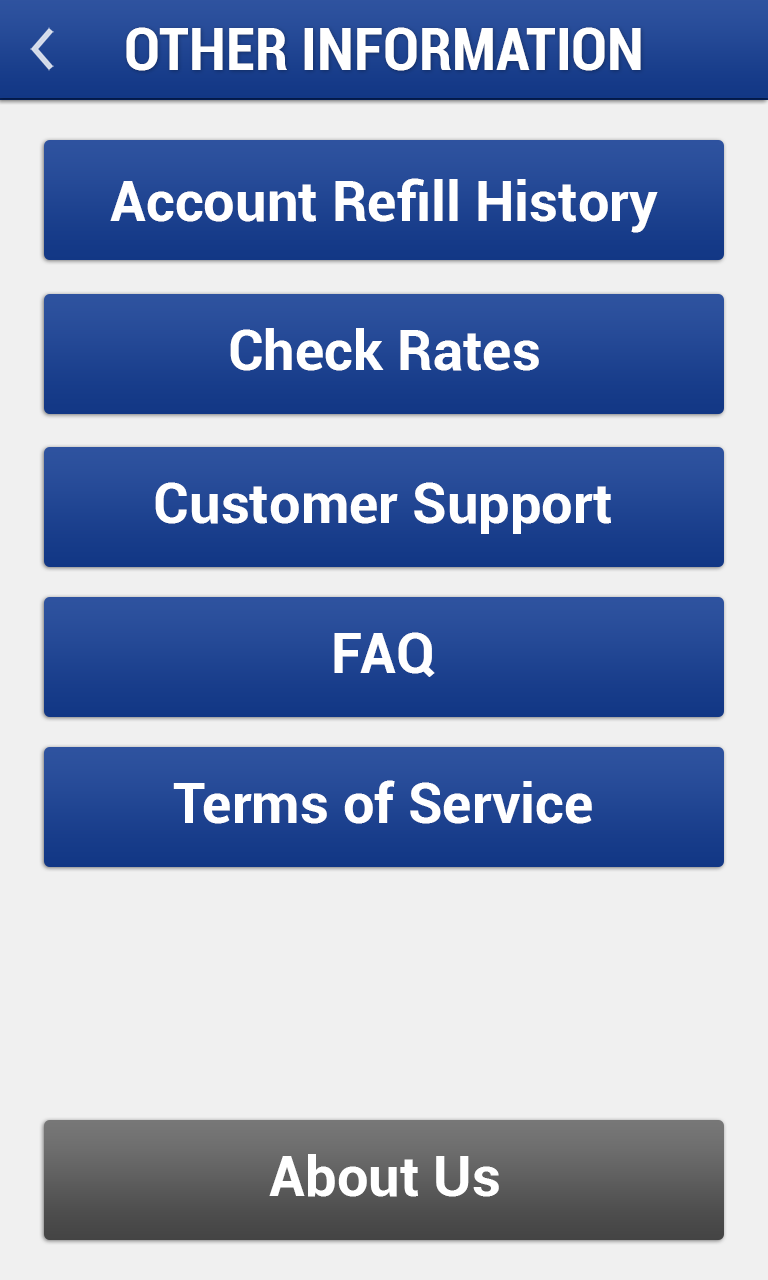
<style>
.page{position:relative;width:768px;height:1280px;background:#f0f0f0}
.page>*{position:absolute;margin:0}
.t1{font:60px "Roboto-BoldCondensed";color:#ffffff}
.t2{font:56px "Roboto-Bold";color:#ffffff}
</style>
<div class="page">
<p class="t1" style="left:126px;top:27px;width:515px;height:44px">OTHER INFORMATION</p>
<p class="t2" style="left:110px;top:178px;width:548px;height:55px">Account Refill History</p>
<p class="t2" style="left:230px;top:328px;width:309px;height:43px">Check Rates</p>
<p class="t2" style="left:155px;top:482px;width:456px;height:52px">Customer Support</p>
<p class="t2" style="left:334px;top:632px;width:101px;height:45px">FAQ</p>
<p class="t2" style="left:173px;top:780px;width:419px;height:44px">Terms of Service</p>
<p class="t2" style="left:269px;top:1154px;width:230px;height:43px">About Us</p>
</div>
